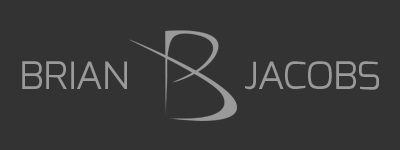
<style>
.page{position:relative;width:400px;height:150px;background:#333333}
.page>*{position:absolute;margin:0}
.t1{font:48px "Exo-Light";letter-spacing:-0.025em;color:#9a9a9a;font-variant:small-caps}
</style>
<div class="page">
<p class="t1" style="left:22px;top:61px;width:105px;height:28px">brian</p>
<p class="t1" style="left:245px;top:61px;width:134px;height:29px">jacobs</p>
</div>
